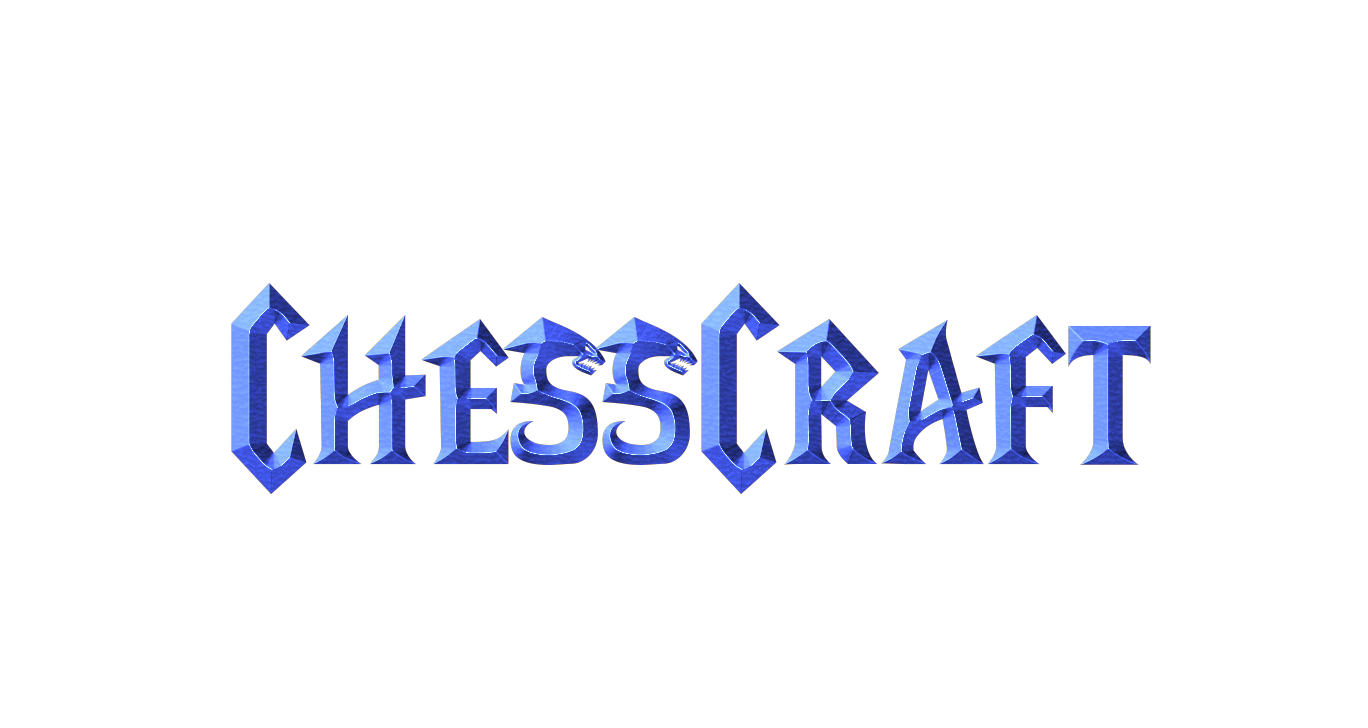
<style>
.page{position:relative;width:1368px;height:728px;background:#ffffff}
.page>*{position:absolute;margin:0}
.t1{font:240px "LifeCraft"}
</style>
<div class="page">
<p class="t1" style="left:231px;top:283px;width:920px;height:211px">ChessCraft</p>
<p class="t1" style="left:231px;top:283px;width:920px;height:211px">ChessCraft</p>
<p class="t1" style="left:231px;top:283px;width:920px;height:211px">ChessCraft</p>
</div>
